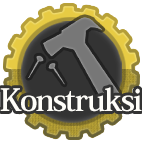
<style>
.page{position:relative;width:142px;height:142px;background:#ffffff}
.page>*{position:absolute;margin:0}
.t1{font:32px "HeiseiMinStd-W7";letter-spacing:-0.04em;color:#fffef9}
</style>
<div class="page">
<p class="t1" style="left:0px;top:87px;width:142px;height:25px">Konstruksi</p>
</div>
